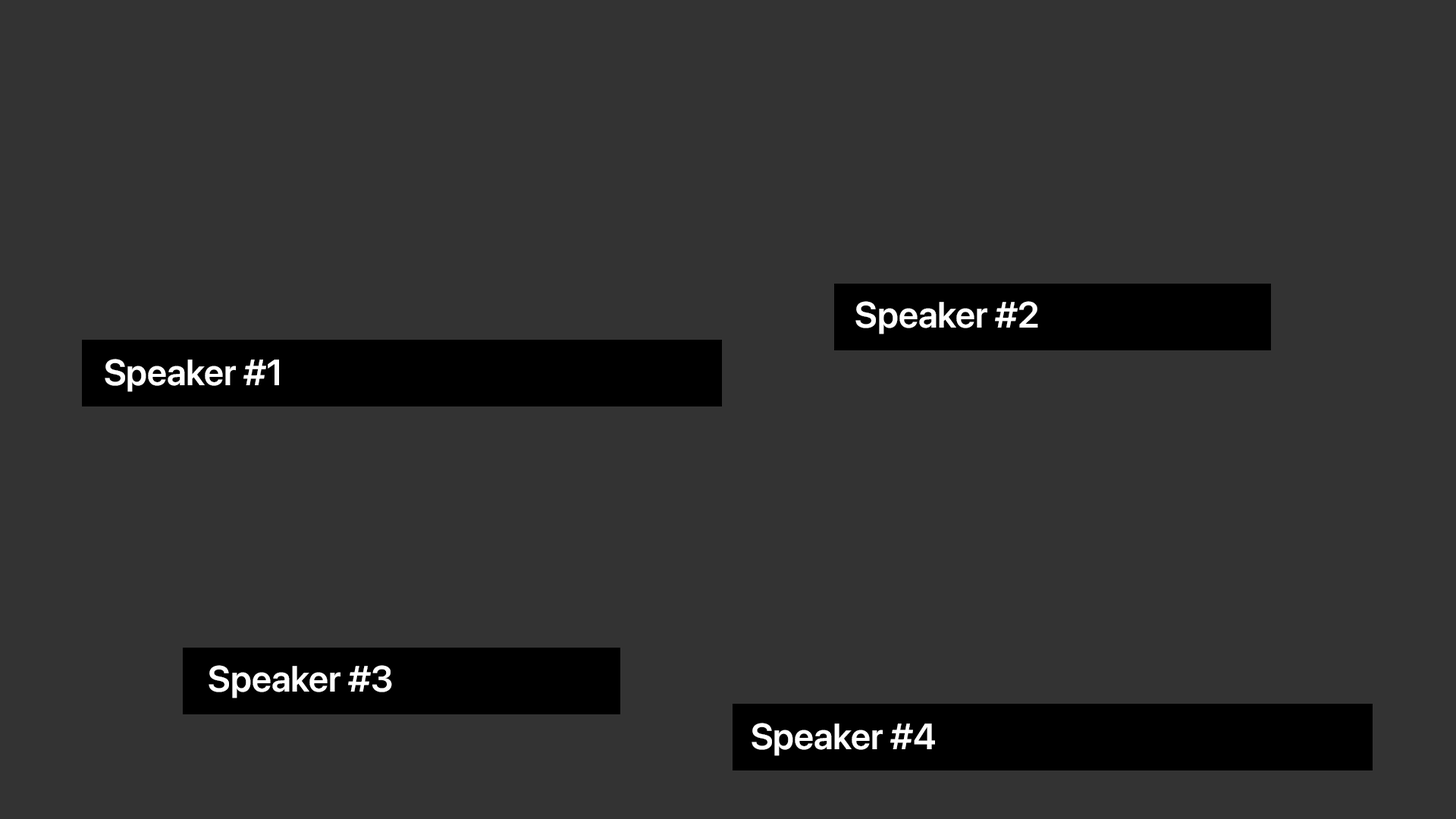
<style>
.page{position:relative;width:1456px;height:819px;background:#333333}
.page>*{position:absolute;margin:0}
.t1{font:36.4px "SFProDisplay-Semibold";color:#ffffff}
</style>
<div class="page">
<p class="t1" style="left:855px;top:301px;width:183px;height:33px">Speaker #2</p>
<p class="t1" style="left:105px;top:359px;width:174px;height:33px">Speaker #1</p>
<p class="t1" style="left:209px;top:665px;width:183px;height:33px">Speaker #3</p>
<p class="t1" style="left:751px;top:723px;width:184px;height:33px">Speaker #4</p>
</div>
